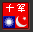
<style>
.page{position:relative;width:33px;height:32px;background:#f20000}
.page>*{position:absolute;margin:0}
.t1{font:10.4px "SimSun";color:#ffffff}
</style>
<div class="page">
<p class="t1" style="left:6px;top:4px;width:19px;height:8px">十军</p>
</div>
